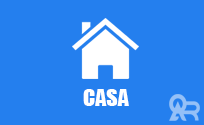
<style>
.page{position:relative;width:204px;height:125px;background:#247fee}
.page>*{position:absolute;margin:0}
.t1{font:22px "Impact";color:#ffffff}
</style>
<div class="page">
<p class="t1" style="left:83px;top:89px;width:46px;height:17px">CASA</p>
</div>
